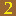
<style>
.page{position:relative;width:16px;height:16px;background:#996633}
.page>*{position:absolute;margin:0}
.t1{font:18px "Sylfaen";color:#f5e814}
</style>
<div class="page">
<p class="t1" style="left:4px;top:2px;width:8px;height:12px">2</p>
</div>
